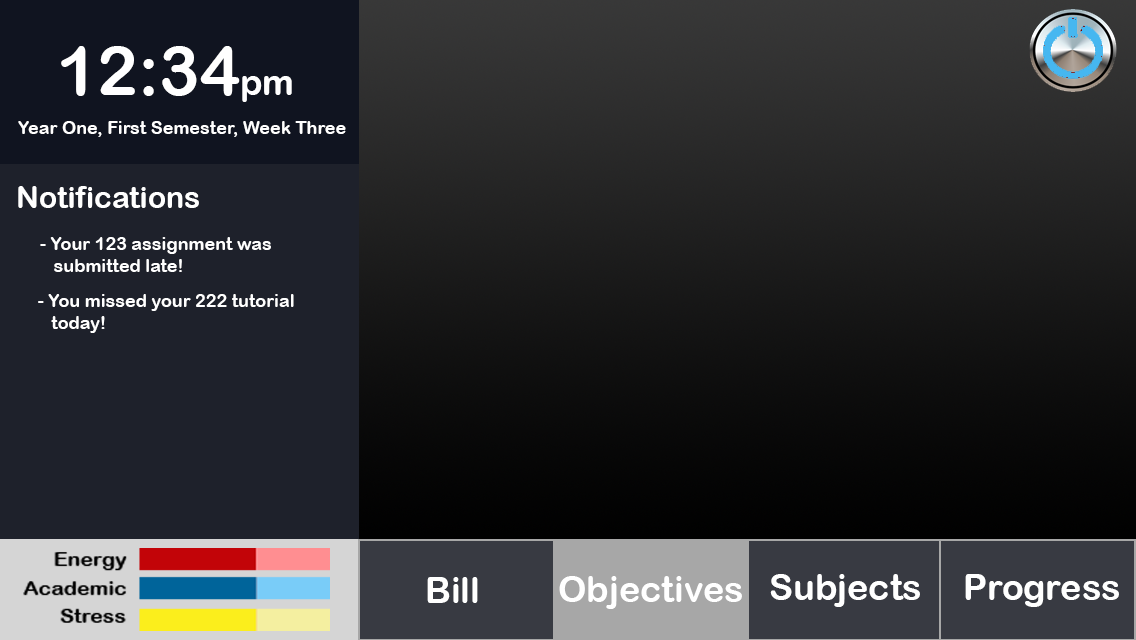
<style>
.page{position:relative;width:1136px;height:640px}
.page>*{position:absolute;margin:0}
.t1{font:68px "ArialRoundedMTBold";color:#ffffff}
.t2{font:36px "ArialRoundedMTBold";color:#ffffff}
.t3{font:18px "ArialRoundedMTBold";color:#ffffff}
.t4{font:30px "ArialRoundedMTBold";color:#ffffff}
</style>
<div class="page">
<p class="t1" style="left:61px;top:46px;width:231px;height:56px">12:34<span class="t2">pm</span></p>
<p class="t3" style="left:18px;top:121px;width:328px;height:16px">Year One, First Semester, Week Three</p>
<p class="t4" style="left:18px;top:186px;width:181px;height:22px">Notifications</p>
<p class="t3" style="left:40px;top:237px;width:231px;height:35px">- Your 123 assignment was <br>   submitted late!</p>
<p class="t3" style="left:38px;top:294px;width:256px;height:39px">- You missed your 222 tutorial <br>   today!</p>
<p class="t2" style="left:427px;top:577px;width:51px;height:26px">Bill</p>
<p class="t2" style="left:559px;top:576px;width:183px;height:33px">Objectives</p>
<p class="t2" style="left:770px;top:574px;width:150px;height:33px">Subjects</p>
<p class="t2" style="left:965px;top:574px;width:154px;height:33px">Progress</p>
</div>
